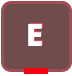
<style>
.page{position:relative;width:72px;height:76px;background:#714c4d}
.page>*{position:absolute;margin:0}
.t1{font:29px "BigJohn";color:#ffffff;text-transform:uppercase}
</style>
<div class="page">
<p class="t1" style="left:28px;top:24px;width:14px;height:22px">E</p>
</div>
